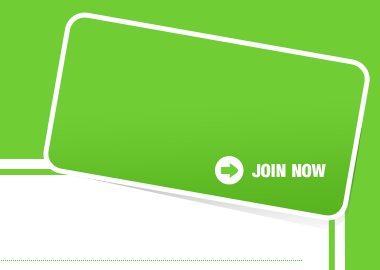
<style>
.page{position:relative;width:380px;height:270px;background:#70ce34}
.page>*{position:absolute;margin:0}
.t1{font:18px "Harvest";color:#ffffff;text-transform:uppercase}
</style>
<div class="page">
<p class="t1" style="left:252px;top:163px;width:74px;height:15px">join now</p>
</div>
